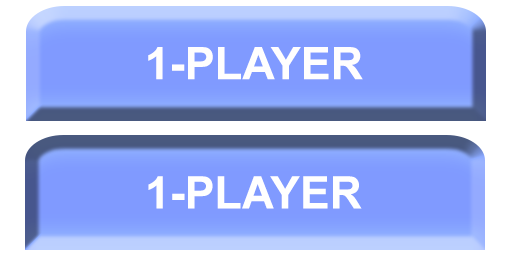
<style>
.page{position:relative;width:512px;height:256px;background:#809aff}
.page>*{position:absolute;margin:0}
.t1{font:45px "Arial-BoldMT";color:#fffefe}
.t2{font:45px "Arial-BoldMT";color:#ffffff}
</style>
<div class="page">
<p class="t1" style="left:148px;top:47px;width:215px;height:33px">1-PLAYER</p>
<p class="t2" style="left:148px;top:176px;width:214px;height:33px">1-PLAYER</p>
</div>
